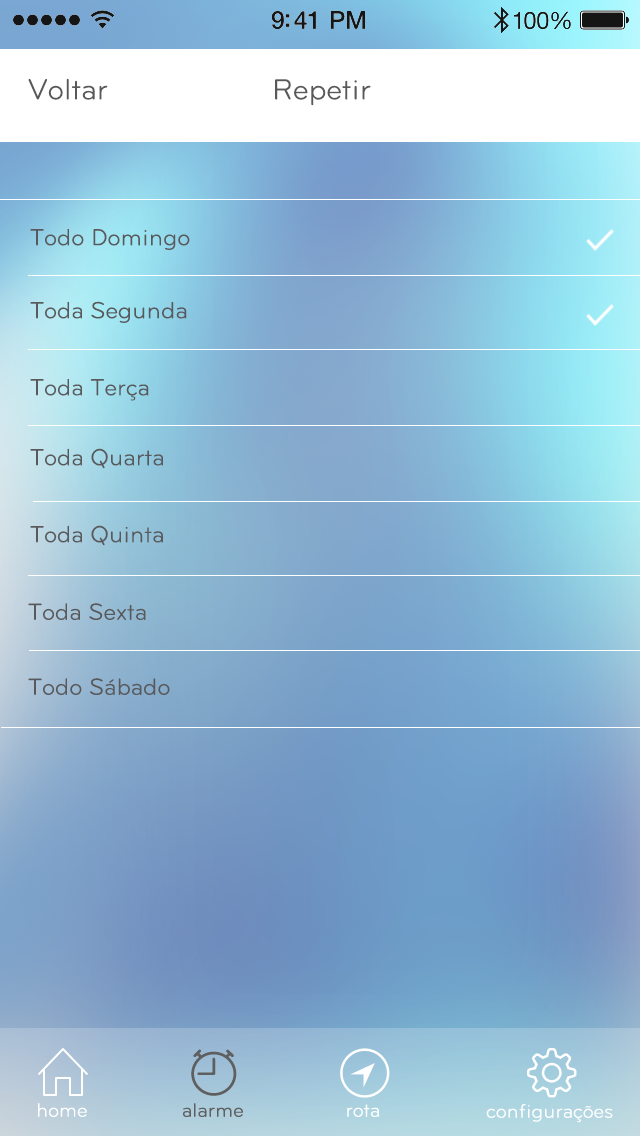
<style>
.page{position:relative;width:640px;height:1136px}
.page>*{position:absolute;margin:0}
.t1{font:30px "Bryant-Regular";color:#59595b}
.t2{font:24px "Bryant-Regular";color:#59595b}
</style>
<div class="page">
<p class="t1" style="left:28px;top:78px;width:80px;height:22px">Voltar</p>
<p class="t1" style="left:275px;top:79px;width:96px;height:27px">Repetir</p>
<p class="t2" style="left:30px;top:228px;width:160px;height:22px">Todo Domingo</p>
<p class="t2" style="left:30px;top:301px;width:157px;height:22px">Toda Segunda</p>
<p class="t2" style="left:30px;top:379px;width:119px;height:22px">Toda Terça</p>
<p class="t2" style="left:30px;top:448px;width:133px;height:21px">Toda Quarta</p>
<p class="t2" style="left:30px;top:525px;width:133px;height:21px">Toda Quinta</p>
<p class="t2" style="left:28px;top:603px;width:118px;height:17px">Toda Sexta</p>
<p class="t2" style="left:28px;top:678px;width:142px;height:17px">Todo Sábado</p>
</div>
